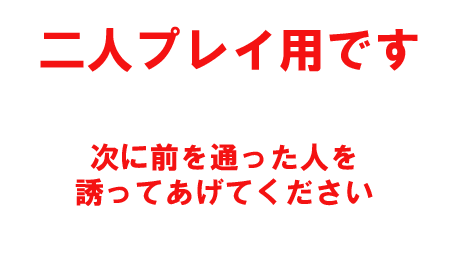
<style>
.page{position:relative;width:454px;height:255px;background:#ffffff}
.page>*{position:absolute;margin:0}
.t1{font:48px "HGSSoeiKakugothicUB";color:#f41212}
.t2{font:30px "HGSSoeiKakugothicUB";color:#f41212}
</style>
<div class="page">
<p class="t1" style="left:40px;top:26px;width:378px;height:46px">二人プレイ用です</p>
<p class="t2" style="left:90px;top:143px;width:266px;height:28px">次に前を通った人を</p>
<p class="t2" style="left:75px;top:178px;width:298px;height:28px">誘ってあげてください</p>
</div>
